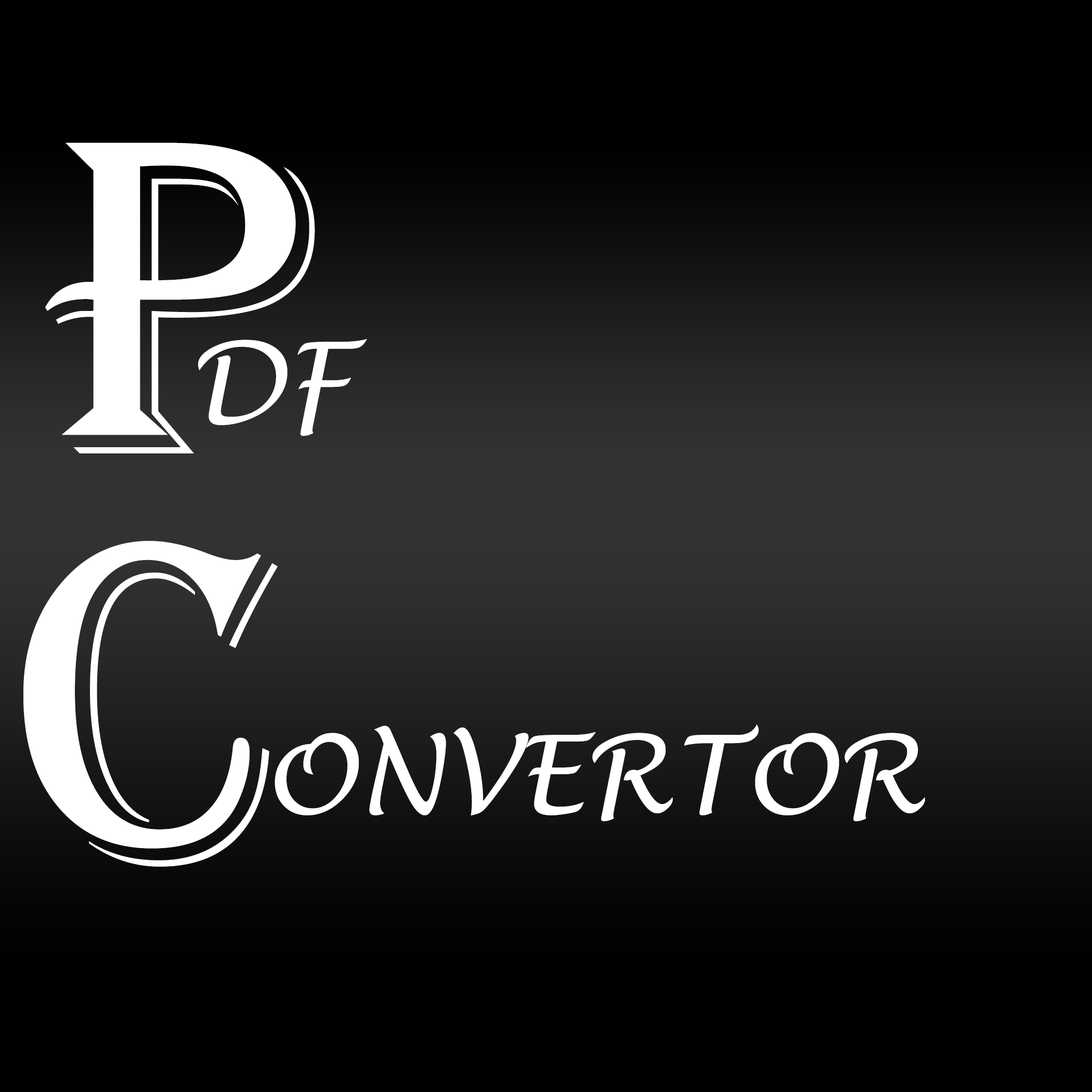
<style>
.page{position:relative;width:1092px;height:1092px;background:#000000}
.page>*{position:absolute;margin:0}
.t1{font:465.9px "Algerian";color:#ffffff}
.t2{font:108.3px "LucidaHandwriting-Italic";color:#ffffff}
</style>
<div class="page">
<p class="t1" style="left:45px;top:142px;width:270px;height:311px">p</p>
<p class="t2" style="left:198px;top:339px;width:169px;height:97px">DF</p>
<p class="t1" style="left:23px;top:541px;width:255px;height:326px">c</p>
<p class="t2" style="left:275px;top:724px;width:650px;height:98px">ONVERTOR</p>
</div>
